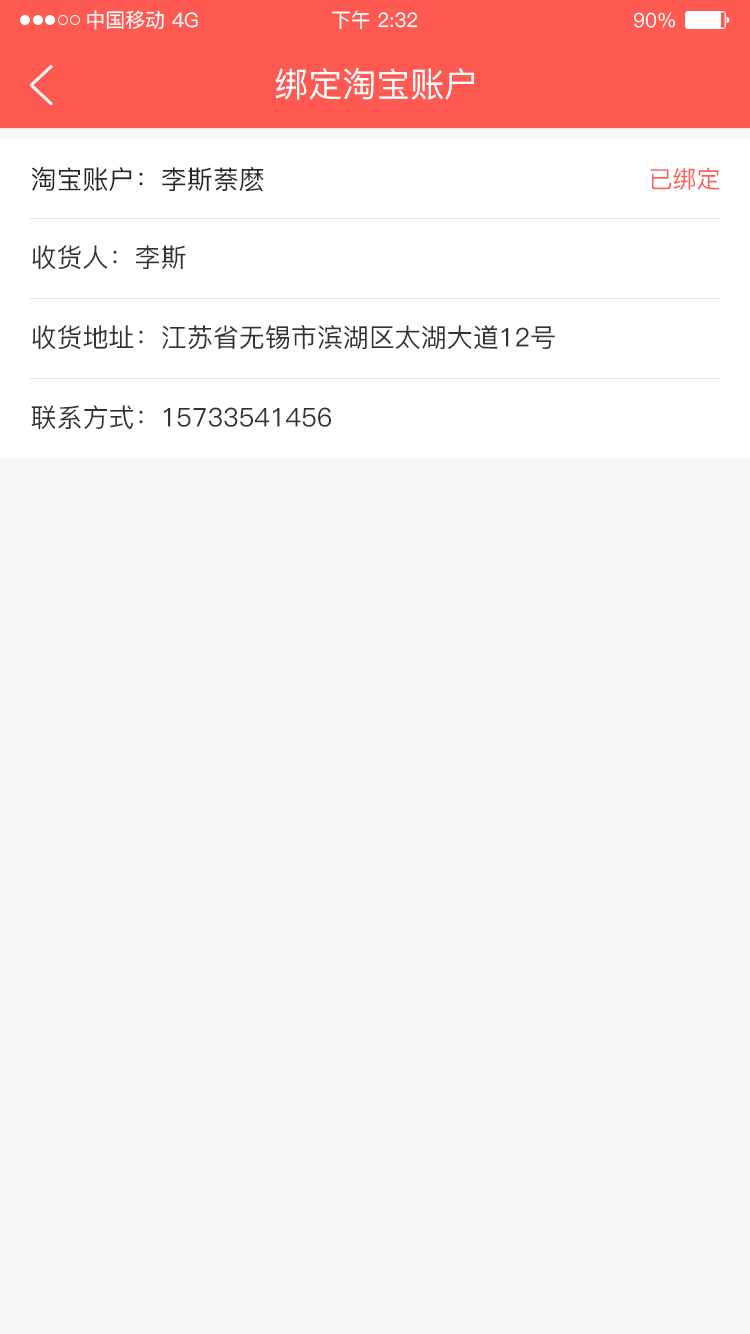
<style>
.page{position:relative;width:750px;height:1334px;background:#f7f7f7}
.page>*{position:absolute;margin:0}
.t1{font:20px "PingFang-SC-Medium";color:#ffffff}
.t2{font:34px "PingFang-SC-Medium";color:#ffffff}
.t3{font:26px "PingFang-SC-Medium";color:#262626}
.t4{font:24px "PingFang-SC-Medium";color:#fe5a51}
.t5{font:26px "PingFang-SC-Medium";color:#333333}
</style>
<div class="page">
<p class="t1" style="left:87px;top:10px;width:77px;height:20px">中国移动</p>
<p class="t1" style="left:172px;top:12px;width:26px;height:16px">4G</p>
<p class="t1" style="left:331px;top:10px;width:87px;height:20px">下午 2:32</p>
<p class="t1" style="left:634px;top:12px;width:41px;height:16px">90%</p>
<p class="t2" style="left:275px;top:68px;width:199px;height:32px">绑定淘宝账户</p>
<p class="t3" style="left:31px;top:166px;width:233px;height:26px">淘宝账户：李斯萘麽</p>
<p class="t4" style="left:650px;top:167px;width:70px;height:23px">已绑定</p>
<p class="t5" style="left:32px;top:245px;width:154px;height:25px">收货人：李斯</p>
<p class="t5" style="left:32px;top:325px;width:523px;height:25px">收货地址：江苏省无锡市滨湖区太湖大道12号</p>
<p class="t5" style="left:31px;top:405px;width:300px;height:25px">联系方式：15733541456</p>
</div>
